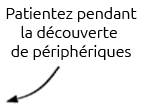
<style>
.page{position:relative;width:142px;height:110px;background:#ffffff}
.page>*{position:absolute;margin:0}
.t1{font:16px "Ubuntu-Light";color:#000000}
</style>
<div class="page">
<p class="t1" style="left:6px;top:7px;width:131px;height:53px;text-align:center">Patientez pendant<br>la découverte <br>de périphériques</p>
</div>
